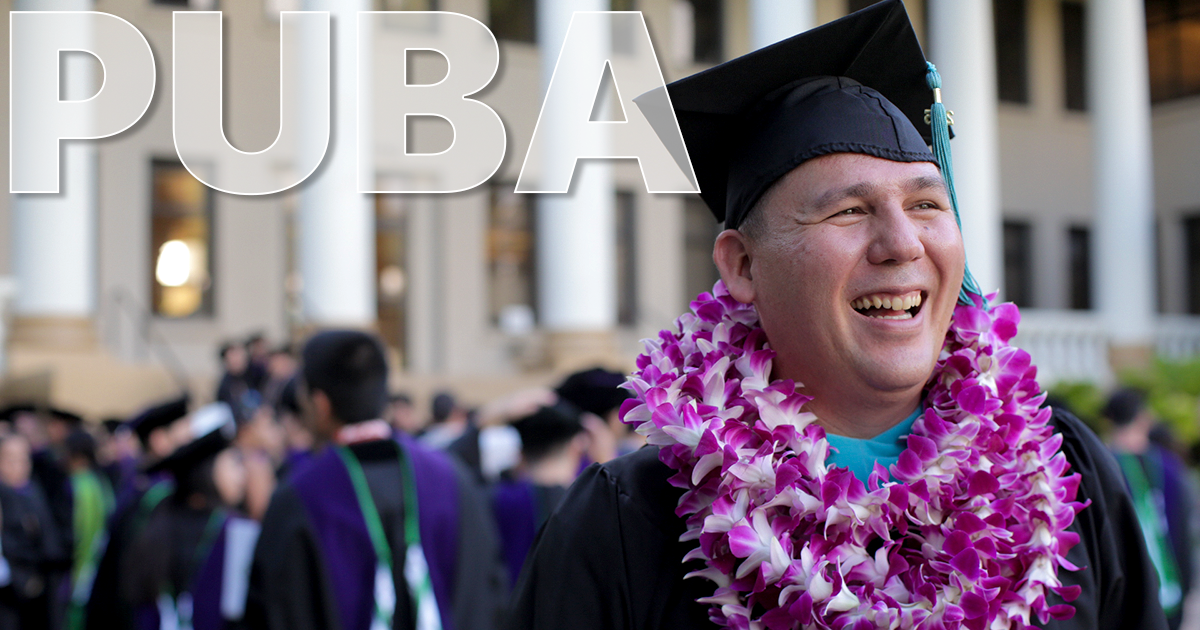
<style>
.page{position:relative;width:1200px;height:630px}
.page>*{position:absolute;margin:0}
.t1{font:250px "Inter-Black"}
</style>
<div class="page">
<p class="t1" style="left:9px;top:11px;width:693px;height:185px">PUBA</p>
</div>
